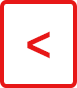
<style>
.page{position:relative;width:77px;height:88px;background:#ffffff}
.page>*{position:absolute;margin:0}
.t1{font:48px "Montserrat-Regular";color:#e71717}
</style>
<div class="page">
<p class="t1" style="left:27px;top:31px;width:23px;height:28px">&lt;</p>
</div>
